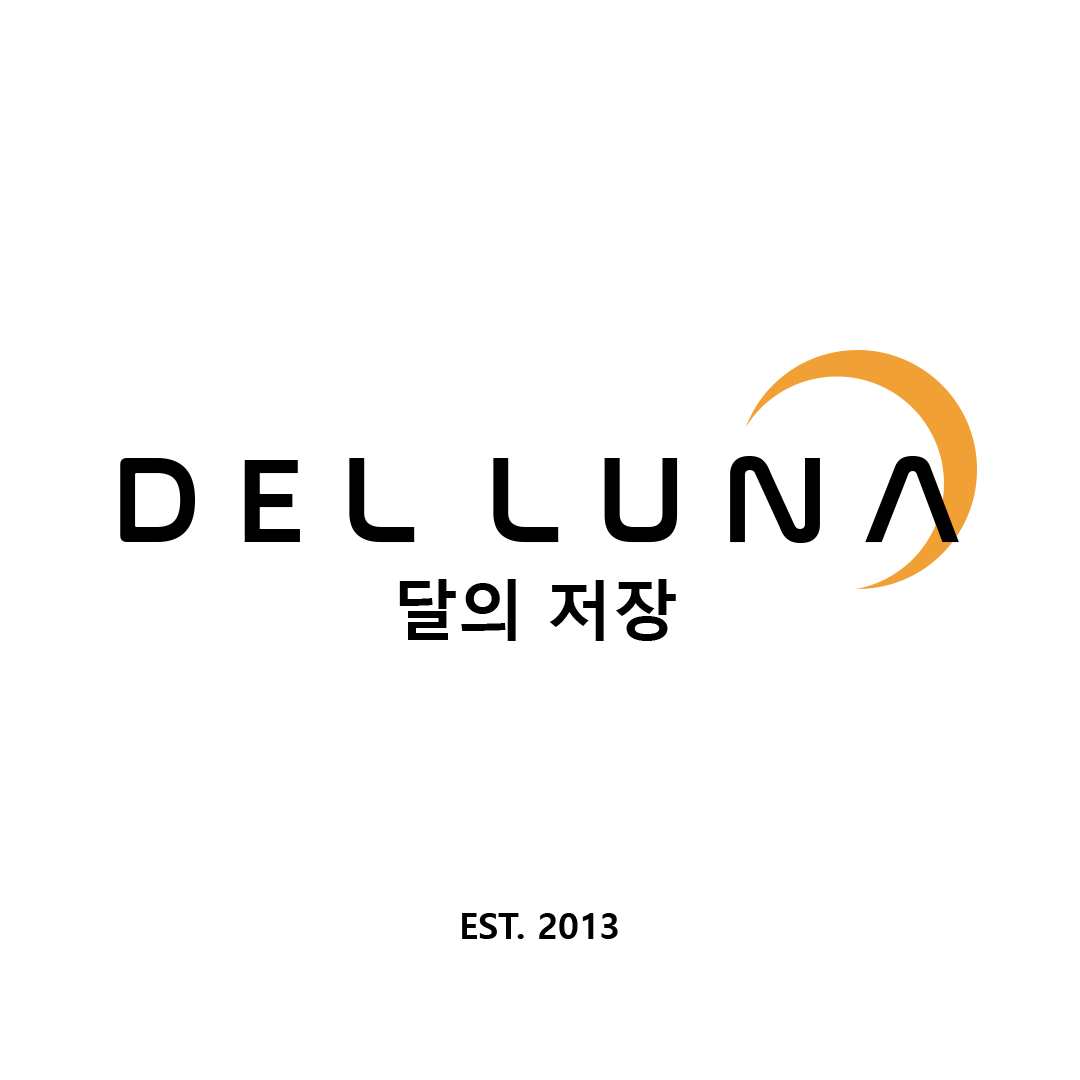
<style>
.page{position:relative;width:1080px;height:1080px;background:#ffffff}
.page>*{position:absolute;margin:0}
.t1{font:125px "NasalizationRg-Regular";color:#000000}
.t2{font:125px "Corbel-Bold";color:#000000}
.t3{font:65.5px "MalgunGothicBold";color:#000000}
.t4{font:35.6px "MalgunGothicBold";color:#000000}
</style>
<div class="page">
<p class="t1" style="left:120px;top:456px;width:839px;height:87px">D <span class="t2">E</span> L  L U N A</p>
<p class="t3" style="left:399px;top:579px;width:277px;height:62px">달의 저장</p>
<p class="t4" style="left:462px;top:913px;width:156px;height:26px">EST. 2013</p>
</div>
